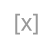
<style>
.page{position:relative;width:53px;height:41px;background:#ffffff}
.page>*{position:absolute;margin:0}
.t1{font:23.7px "DroidSans";color:#999999}
</style>
<div class="page">
<p class="t1" style="left:15px;top:13px;width:23px;height:22px">[x]</p>
</div>
